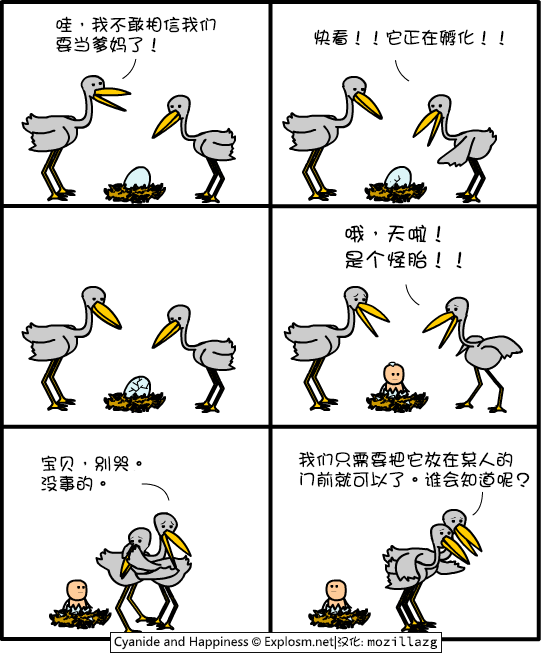
<style>
.page{position:relative;width:542px;height:654px;background:#ffffff}
.page>*{position:absolute;margin:0}
.t1{font:18px/20px "DFGirl";color:#000000}
.t2{font:18px "DFGirl";color:#000000}
.t3{font:21px/26px "DFGirl";color:#000000}
</style>
<div class="page">
<p class="t1" style="left:56px;top:16px;width:160px;height:37px">哇，我不敢相信我们<br>要当爹妈了！</p>
<p class="t2" style="left:314px;top:29px;width:190px;height:17px">快看！！它正在孵化！！</p>
<p class="t3" style="left:345px;top:224px;width:117px;height:45px">哦，天啦！<br>是个怪胎！！</p>
<p class="t1" style="left:41px;top:455px;width:101px;height:37px">宝贝，别哭。<br>没事的。</p>
<p class="t1" style="left:298px;top:451px;width:232px;height:37px">我们只需要把它放在某人的<br>门前就可以了。谁会知道呢？</p>
</div>
